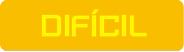
<style>
.page{position:relative;width:184px;height:52px;background:#fabe00}
.page>*{position:absolute;margin:0}
.t1{font:24px "KafuTechnoStd-HV";letter-spacing:0.024em;color:#fff400}
</style>
<div class="page">
<p class="t1" style="left:42px;top:9px;width:105px;height:28px">DIFÍCIL</p>
</div>
